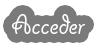
<style>
.page{position:relative;width:95px;height:50px;background:#7b7a7a}
.page>*{position:absolute;margin:0}
.t1{font:30px "GiddyupStd";color:#fefffd}
</style>
<div class="page">
<p class="t1" style="left:12px;top:14px;width:74px;height:20px">Acceder</p>
</div>
